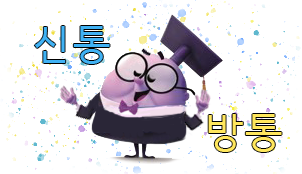
<style>
.page{position:relative;width:302px;height:174px;background:#ffffff}
.page>*{position:absolute;margin:0}
.t1{font:40px "HCRDotum";color:#40b2f4}
.t2{font:40px "HCRDotum";color:#ffe75d}
</style>
<div class="page">
<p class="t1" style="left:34px;top:26px;width:76px;height:38px">신통</p>
<p class="t2" style="left:208px;top:114px;width:74px;height:38px">방통</p>
</div>
